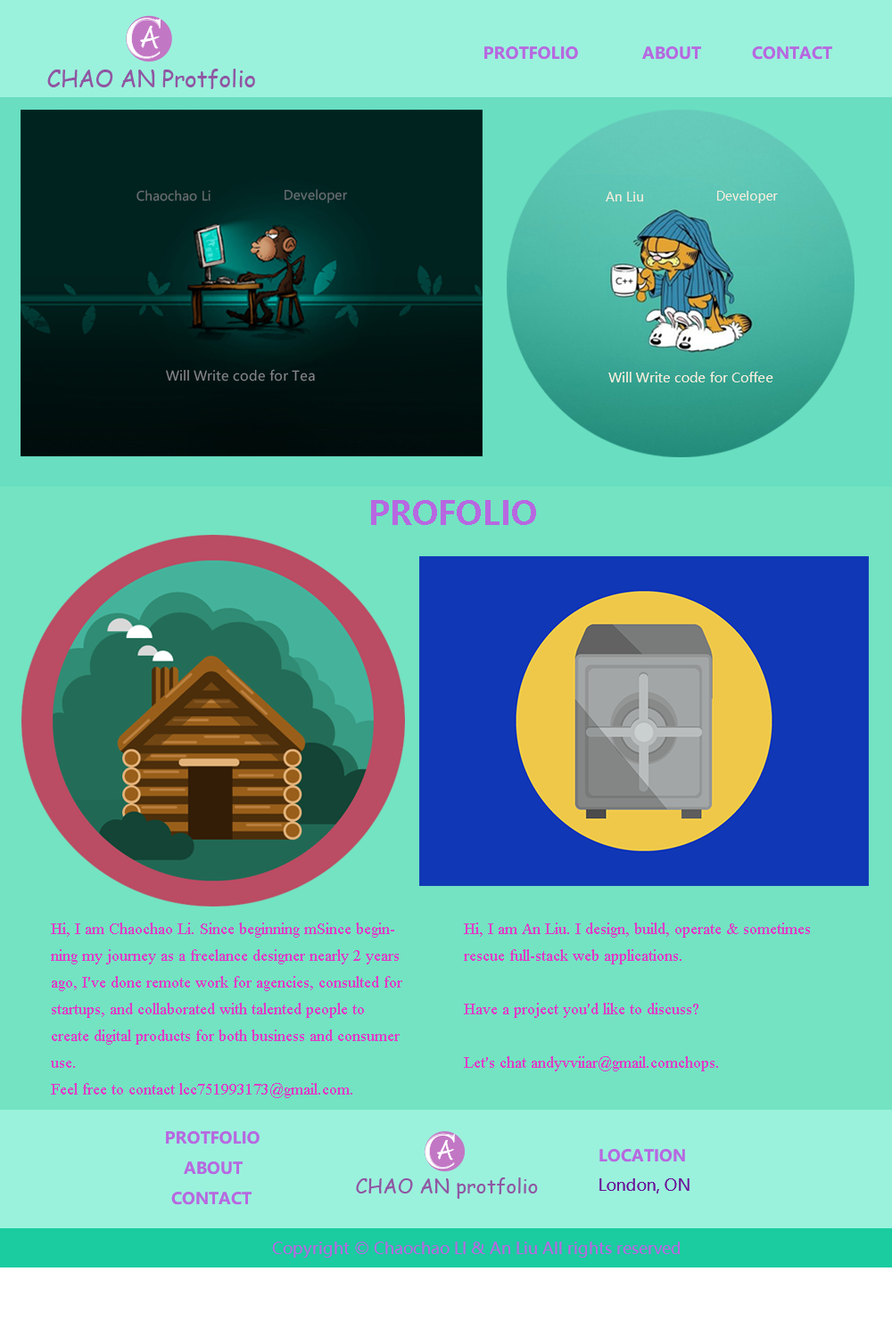
<style>
.page{position:relative;width:892px;height:1337px;background:#73e3c2}
.page>*{position:absolute;margin:0}
.t1{font:16px "MicrosoftYaHeiUI-Bold";color:#b768e0}
.t2{font:12.7px "MicrosoftYaHeiUI";color:#6a6d71}
.t3{font:12.7px "MicrosoftYaHeiUI";color:#f2ebda}
.t4{font:13.4px "MicrosoftYaHeiUI";color:#858489}
.t5{font:13.4px "MicrosoftYaHeiUI";color:#f2ebda}
.t6{font:32.1px "MicrosoftYaHeiUI-Bold";color:#b768e0}
.t7{font:16px/26.7px "TimesNewRomanPSMT";color:#df3cc6}
.t8{font:16px "MicrosoftYaHeiUI";color:#6b1398}
.t9{font:16px "MicrosoftYaHeiUI";color:#b768e0}
</style>
<div class="page">
<p class="t1" style="left:484px;top:46px;width:94px;height:14px">PROTFOLIO</p>
<p class="t1" style="left:642px;top:46px;width:59px;height:14px">ABOUT</p>
<p class="t1" style="left:752px;top:46px;width:80px;height:14px">CONTACT</p>
<p class="t2" style="left:136px;top:190px;width:74px;height:12px">Chaochao Li</p>
<p class="t2" style="left:284px;top:189px;width:64px;height:14px">Developer</p>
<p class="t3" style="left:605px;top:192px;width:38px;height:10px">An Liu</p>
<p class="t3" style="left:717px;top:191px;width:60px;height:12px">Developer</p>
<p class="t4" style="left:166px;top:369px;width:149px;height:13px">Will Write code for Tea</p>
<p class="t5" style="left:608px;top:372px;width:165px;height:10px">Will Write code for Coffee</p>
<p class="t6" style="left:371px;top:500px;width:165px;height:25px">PROFOLIO</p>
<p class="t7" style="left:51px;top:923px;width:351px;height:175px">Hi, I am Chaochao Li. Since beginning mSince beginning my journey as a freelance designer nearly 2 years ago, I've done remote work for agencies, consulted for startups, and collaborated with talented people to create digital products for both business and consumer use. <br>Feel free to contact lcc751993173@gmail.com.</p>
<p class="t7" style="left:464px;top:923px;width:346px;height:149px">Hi, I am An Liu. I design, build, operate &amp; sometimes rescue full-stack web applications.<br><br>Have a project you'd like to discuss?<br><br>Let's chat andyvviiar@gmail.comchops.</p>
<p class="t1" style="left:166px;top:1131px;width:93px;height:14px">PROTFOLIO</p>
<p class="t1" style="left:599px;top:1149px;width:86px;height:14px">LOCATION</p>
<p class="t1" style="left:184px;top:1162px;width:59px;height:13px">ABOUT</p>
<p class="t8" style="left:599px;top:1179px;width:90px;height:15px">London, ON</p>
<p class="t1" style="left:171px;top:1192px;width:80px;height:13px">CONTACT</p>
<p class="t9" style="left:272px;top:1242px;width:407px;height:16px">Copyright © Chaochao LI &amp; An Liu All rights reserved</p>
</div>
